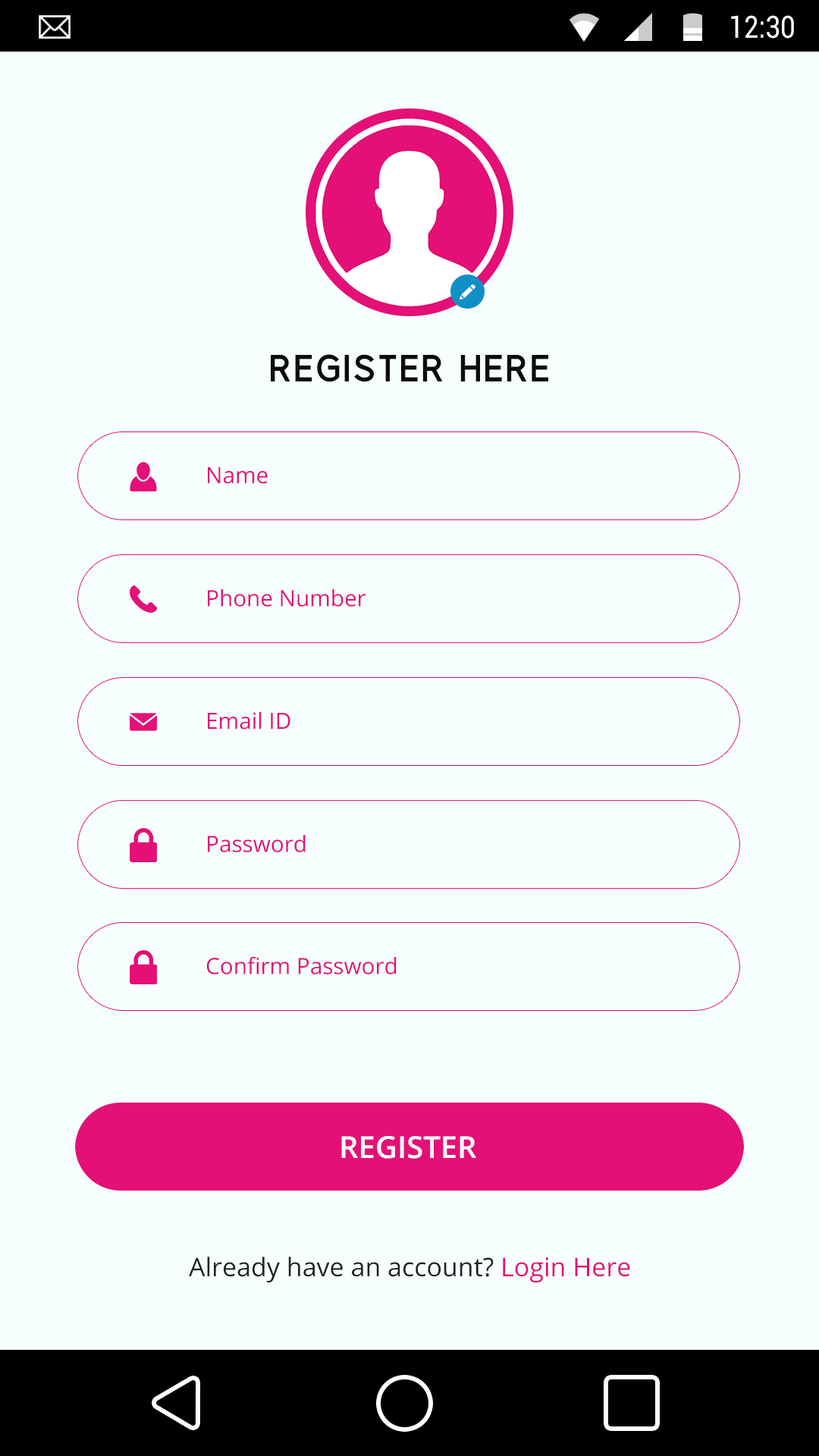
<style>
.page{position:relative;width:819px;height:1456px;background:#f7fffe}
.page>*{position:absolute;margin:0}
.t1{font:30.5px "Roboto-Regular";color:#ffffff;scale:0.87 1}
.t2{font:37.9px "BerlinBold";letter-spacing:0.1em;color:#0c0c0c}
.t3{font:22.5px "OpenSans";color:#e41077}
.t4{font:22.6px "OpenSans";color:#e41077}
.t5{font:30.3px "OpenSans-Semibold";color:#ffffff}
.t6{font:25.8px "OpenSans";color:#222222}
.t7{font:25.8px "OpenSans";color:#e41077}
</style>
<div class="page">
<p class="t1" style="left:731px;top:15px;width:63px;height:24px">12:30</p>
<p class="t2" style="left:271px;top:354px;width:277px;height:28px">REGISTER HERE</p>
<p class="t3" style="left:208px;top:467px;width:60px;height:17px">Name</p>
<p class="t3" style="left:208px;top:589px;width:158px;height:18px">Phone Number</p>
<p class="t3" style="left:208px;top:711px;width:82px;height:19px">Email ID</p>
<p class="t3" style="left:208px;top:835px;width:98px;height:17px">Password</p>
<p class="t4" style="left:206px;top:956px;width:191px;height:18px">Confirm Password</p>
<p class="t5" style="left:341px;top:1136px;width:135px;height:23px">REGISTER</p>
<p class="t6" style="left:189px;top:1257px;width:441px;height:26px">Already have an account? <span class="t7">Login Here</span></p>
</div>
